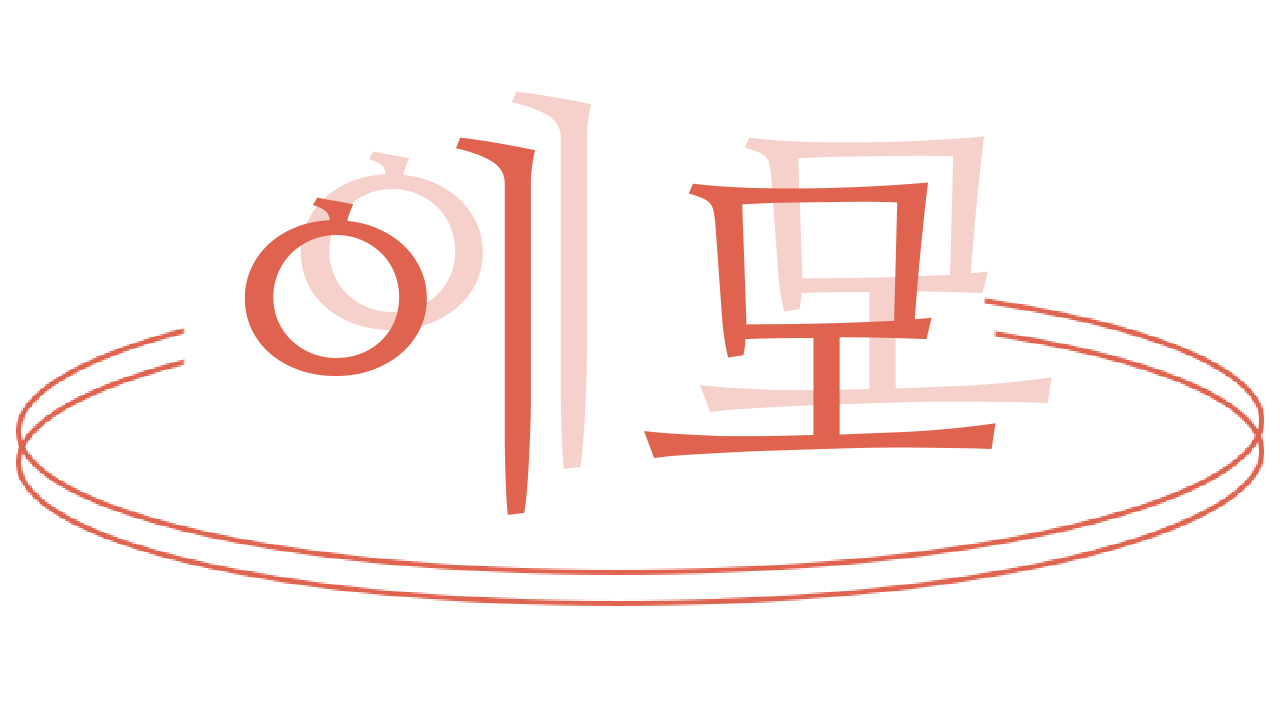
<style>
.page{position:relative;width:1280px;height:720px;background:#ffffff}
.page>*{position:absolute;margin:0}
.t1{font:398.8px "NanumMyeongjo";letter-spacing:0.1em;color:#e0634f}
</style>
<div class="page">
<p class="t1" style="left:244px;top:137px;width:752px;height:378px">이모</p>
</div>
